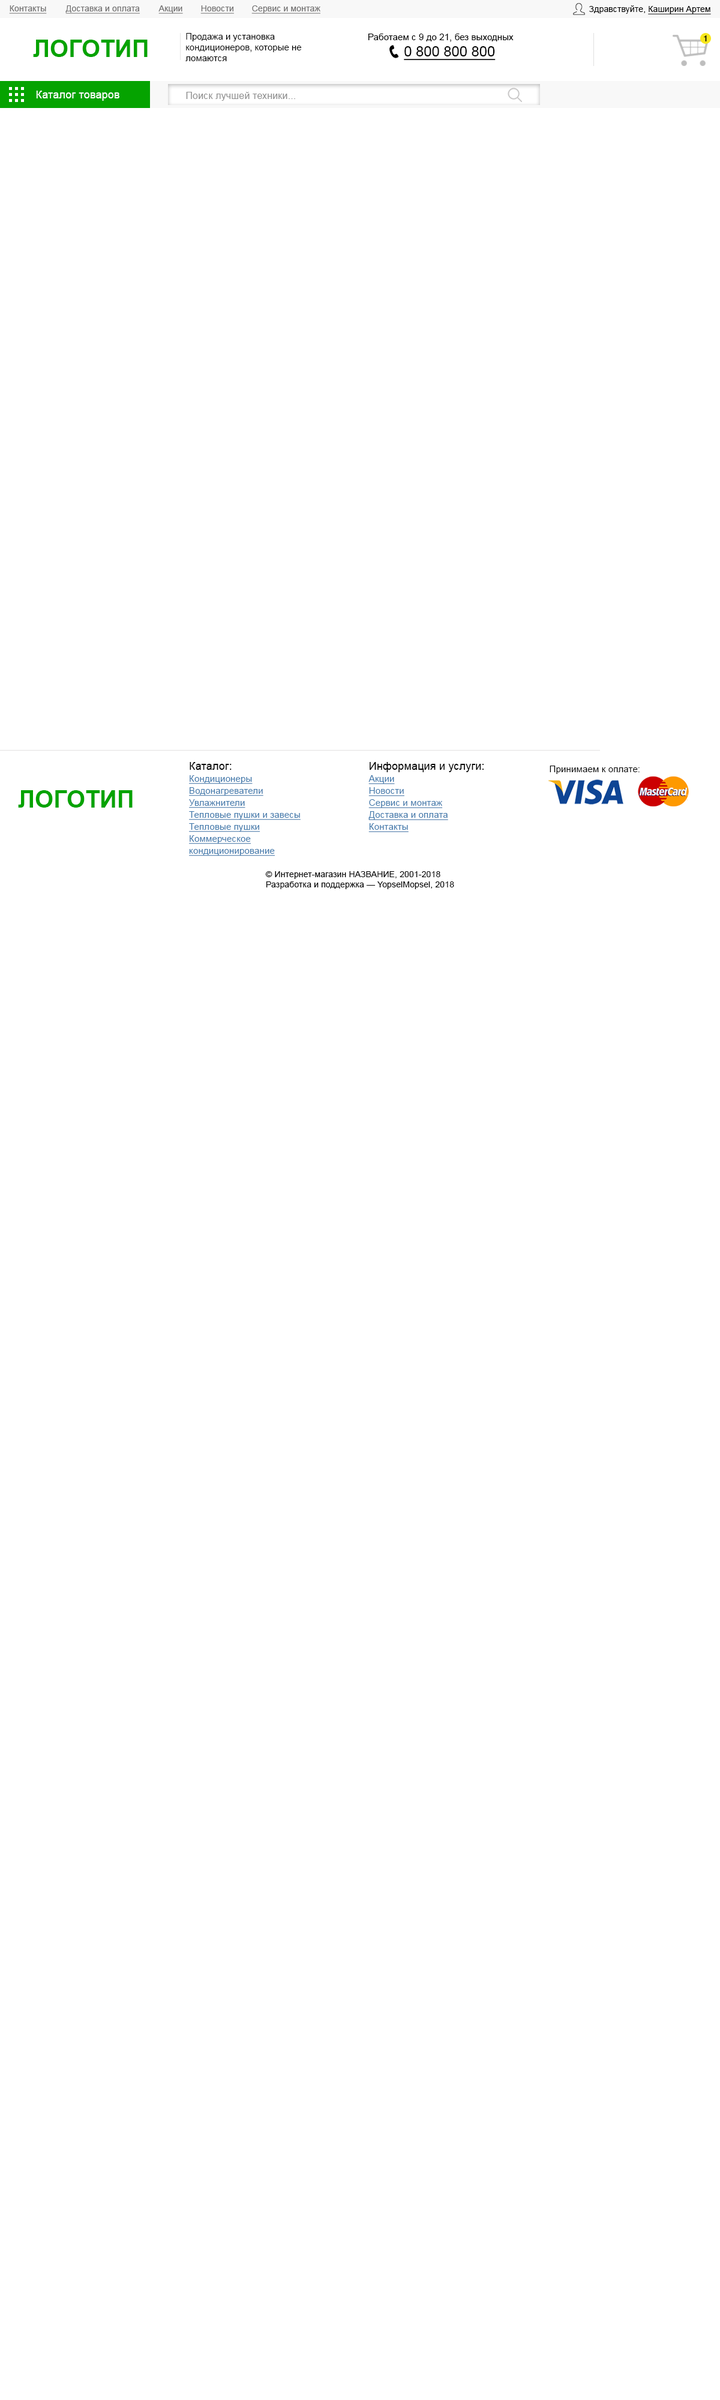
<style>
.page{position:relative;width:720px;height:2400px;background:#ffffff}
.page>*{position:absolute;margin:0}
.t1{font:8.4px "ArialMT";letter-spacing:0.01em;color:#717070;text-decoration:underline}
.t2{font:8.4px "ArialMT";letter-spacing:0.01em;color:#000000}
.t3{font:8.4px "ArialMT";letter-spacing:0.01em;color:#000000;text-decoration:underline}
.t4{font:24px "Arial-BoldMT";color:#05a300}
.t5{font:9px "ArialMT";color:#000000}
.t6{font:9px "ArialMT";letter-spacing:0.01em;color:#000000}
.t7{font:8.4px "HelveticaNeue-Medium";letter-spacing:0.01em;color:#000000}
.t8{font:14.4px "ArialMT";color:#000000;text-decoration:underline}
.t9{font:10.8px "ArialMT";letter-spacing:0.01em;color:#ffffff}
.t10{font:9.6px "ArialMT";letter-spacing:0.01em;color:#909090}
.t11{font:9px/12px "ArialMT";letter-spacing:0.01em;color:#3e77aa;text-decoration:underline}
.t12{font:10.8px/12px "ArialMT";letter-spacing:0.01em;color:#000000}
</style>
<div class="page">
<p class="t1" style="left:9px;top:5px;width:38px;height:9px">Контакты</p>
<p class="t1" style="left:65px;top:5px;width:75px;height:9px">Доставка и оплата</p>
<p class="t1" style="left:158px;top:5px;width:25px;height:9px">Акции</p>
<p class="t1" style="left:200px;top:5px;width:34px;height:9px">Новости</p>
<p class="t1" style="left:251px;top:5px;width:69px;height:9px">Сервис и монтаж</p>
<p class="t2" style="left:589px;top:5px;width:122px;height:9px">Здравствуйте, <span class="t3">Каширин Артем</span></p>
<p class="t4" style="left:33px;top:40px;width:115px;height:17px">ЛОГОТИП</p>
<p class="t5" style="left:185px;top:33px;width:117px;height:28px">Продажа и установка<br>кондиционеров, которые не<br>ломаются</p>
<p class="t6" style="left:368px;top:34px;width:146px;height:8px">Работаем с 9 до 21, без выходных</p>
<p class="t7" style="left:704px;top:35px;width:3px;height:6px">1</p>
<p class="t8" style="left:404px;top:46px;width:92px;height:15px">0 800 800 800</p>
<p class="t9" style="left:36px;top:91px;width:83px;height:10px">Каталог товаров</p>
<p class="t10" style="left:186px;top:92px;width:109px;height:9px">Поиск лучшей техники...</p>
<p class="t11" style="left:189px;top:762px;width:112px;height:94px"><span class="t12">Каталог:<br></span>Кондиционеры<br>Водонагреватели<br>Увлажнители<br>Тепловые пушки и завесы<br>Тепловые пушки<br>Коммерческое<br>кондиционирование</p>
<p class="t11" style="left:368px;top:762px;width:116px;height:70px"><span class="t12">Информация и услуги:<br></span>Акции<br>Новости<br>Сервис и монтаж<br>Доставка и оплата<br>Контакты</p>
<p class="t6" style="left:550px;top:766px;width:90px;height:8px">Принимаем к оплате:</p>
<p class="t4" style="left:18px;top:790px;width:115px;height:18px">ЛОГОТИП</p>
<p class="t2" style="left:265px;top:871px;width:189px;height:18px">© Интернет-магазин НАЗВАНИЕ, 2001-2018<br>Разработка и поддержка — YopselMopsel, 2018</p>
</div>
